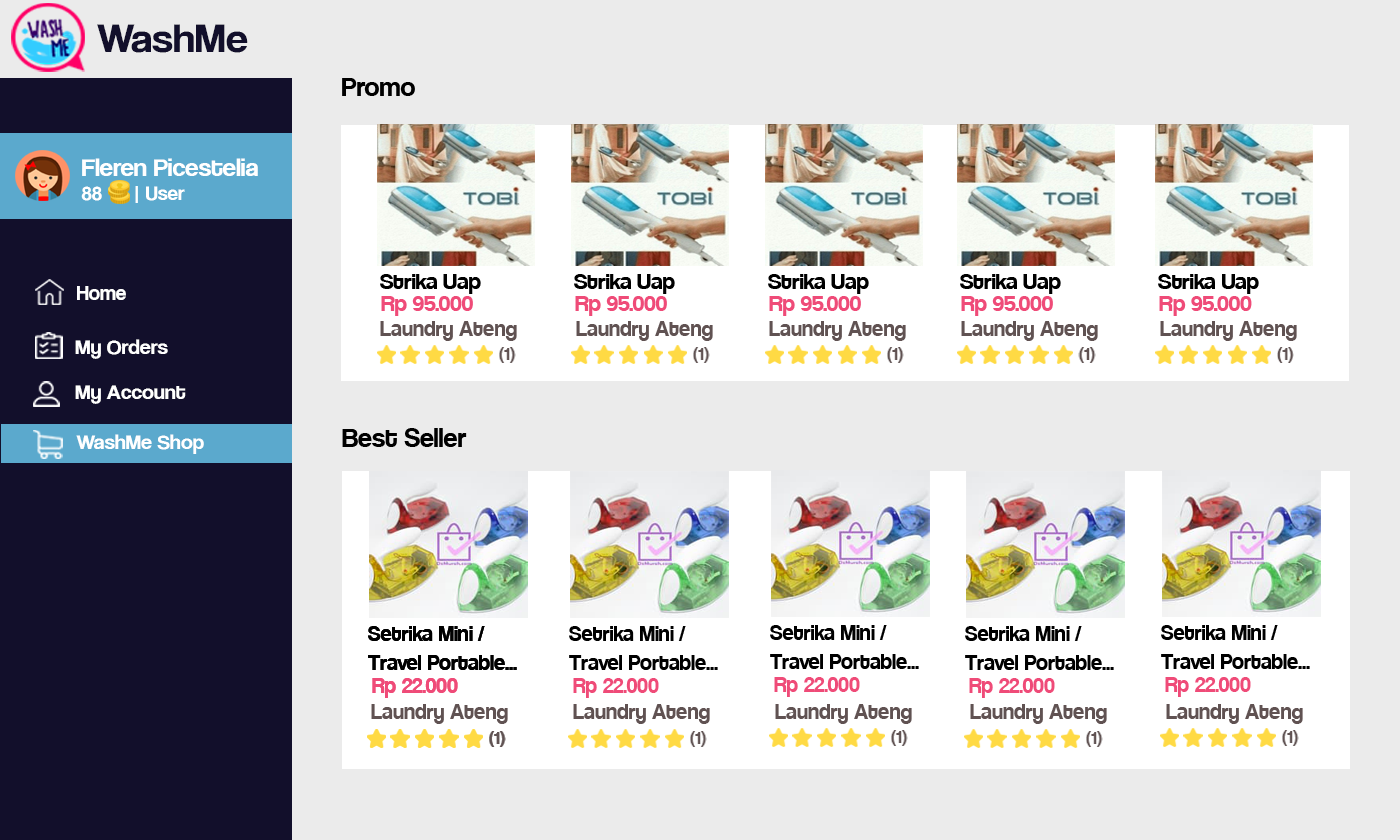
<style>
.page{position:relative;width:1400px;height:840px;background:#ebebeb}
.page>*{position:absolute;margin:0}
.t1{font:42.1px "CoolveticaRg-Regular";color:#120f2b;scale:1.05 1}
.t2{font:30px "Coolvetica-Regular";color:#000000}
.t3{font:25.2px "CoolveticaRg-Regular";color:#ffffff;scale:1.05 1}
.t4{font:20px "CoolveticaRg-Regular";color:#ffffff;scale:1.05 1}
.t5{font:24px "Coolvetica-Regular";color:#000000;scale:1.07 1}
.t6{font:21px "CoolveticaRg-Regular";color:#ffffff}
.t7{font:24px "Coolvetica-Regular";color:#ef4b78;scale:1.07 1}
.t8{font:24px "Coolvetica-Regular";color:#605252}
.t9{font:21px "CoolveticaRg-Regular";color:#ffffff;scale:1.05 1}
.t10{font:18px "CoolveticaRg-Regular";color:#605252;scale:1.07 1}
.t11{font:24px "Coolvetica-Regular";color:#000000}
.t12{font:24px "Coolvetica-Regular";color:#ef4b78}
</style>
<div class="page">
<p class="t1" style="left:97px;top:24px;width:151px;height:29px">WashMe</p>
<p class="t2" style="left:342px;top:78px;width:73px;height:18px">Promo</p>
<p class="t3" style="left:81px;top:158px;width:177px;height:45px">Fleren Picestelia<br><span class="t4">88      | User</span></p>
<p class="t5" style="left:380px;top:274px;width:101px;height:20px">Strika Uap</p>
<p class="t5" style="left:574px;top:274px;width:101px;height:20px">Strika Uap</p>
<p class="t5" style="left:768px;top:274px;width:101px;height:20px">Strika Uap</p>
<p class="t5" style="left:960px;top:274px;width:101px;height:20px">Strika Uap</p>
<p class="t5" style="left:1158px;top:274px;width:101px;height:20px">Strika Uap</p>
<p class="t6" style="left:77px;top:286px;width:49px;height:14px">Home</p>
<p class="t7" style="left:381px;top:296px;width:92px;height:20px">Rp 95.000</p>
<p class="t7" style="left:575px;top:296px;width:92px;height:20px">Rp 95.000</p>
<p class="t7" style="left:769px;top:296px;width:92px;height:20px">Rp 95.000</p>
<p class="t7" style="left:961px;top:296px;width:92px;height:20px">Rp 95.000</p>
<p class="t7" style="left:1159px;top:296px;width:93px;height:20px">Rp 95.000</p>
<p class="t8" style="left:380px;top:321px;width:137px;height:20px">Laundry Ateng</p>
<p class="t8" style="left:576px;top:321px;width:137px;height:20px">Laundry Ateng</p>
<p class="t8" style="left:769px;top:321px;width:137px;height:20px">Laundry Ateng</p>
<p class="t8" style="left:961px;top:321px;width:137px;height:20px">Laundry Ateng</p>
<p class="t8" style="left:1160px;top:321px;width:137px;height:20px">Laundry Ateng</p>
<p class="t9" style="left:75px;top:339px;width:93px;height:20px">My Orders</p>
<p class="t10" style="left:499px;top:347px;width:17px;height:16px">(1)</p>
<p class="t10" style="left:693px;top:347px;width:17px;height:16px">(1)</p>
<p class="t10" style="left:887px;top:347px;width:17px;height:16px">(1)</p>
<p class="t10" style="left:1078px;top:347px;width:18px;height:16px">(1)</p>
<p class="t10" style="left:1277px;top:347px;width:17px;height:16px">(1)</p>
<p class="t9" style="left:75px;top:385px;width:111px;height:19px">My Account</p>
<p class="t9" style="left:76px;top:434px;width:128px;height:20px">WashMe Shop</p>
<p class="t2" style="left:342px;top:428px;width:125px;height:19px">Best Seller</p>
<p class="t11" style="left:368px;top:626px;width:149px;height:44px">Setrika Mini / <br>Travel Portable...</p>
<p class="t11" style="left:368px;top:626px;width:149px;height:44px">Setrika Mini / <br>Travel Portable...</p>
<p class="t11" style="left:569px;top:626px;width:149px;height:44px">Setrika Mini / <br>Travel Portable...</p>
<p class="t11" style="left:770px;top:625px;width:149px;height:44px">Setrika Mini / <br>Travel Portable...</p>
<p class="t11" style="left:965px;top:626px;width:149px;height:44px">Setrika Mini / <br>Travel Portable...</p>
<p class="t11" style="left:1161px;top:625px;width:149px;height:44px">Setrika Mini / <br>Travel Portable...</p>
<p class="t12" style="left:372px;top:678px;width:86px;height:20px">Rp 22.000</p>
<p class="t12" style="left:372px;top:678px;width:86px;height:20px">Rp 22.000</p>
<p class="t12" style="left:573px;top:678px;width:86px;height:20px">Rp 22.000</p>
<p class="t12" style="left:774px;top:677px;width:86px;height:20px">Rp 22.000</p>
<p class="t12" style="left:969px;top:678px;width:86px;height:20px">Rp 22.000</p>
<p class="t12" style="left:1165px;top:677px;width:86px;height:20px">Rp 22.000</p>
<p class="t8" style="left:371px;top:704px;width:137px;height:20px">Laundry Ateng</p>
<p class="t8" style="left:573px;top:704px;width:137px;height:20px">Laundry Ateng</p>
<p class="t8" style="left:775px;top:704px;width:137px;height:20px">Laundry Ateng</p>
<p class="t8" style="left:970px;top:704px;width:137px;height:20px">Laundry Ateng</p>
<p class="t8" style="left:1166px;top:704px;width:137px;height:20px">Laundry Ateng</p>
<p class="t10" style="left:489px;top:731px;width:17px;height:16px">(1)</p>
<p class="t10" style="left:489px;top:731px;width:17px;height:16px">(1)</p>
<p class="t10" style="left:690px;top:731px;width:17px;height:16px">(1)</p>
<p class="t10" style="left:891px;top:730px;width:17px;height:16px">(1)</p>
<p class="t10" style="left:1086px;top:731px;width:17px;height:16px">(1)</p>
<p class="t10" style="left:1282px;top:730px;width:17px;height:16px">(1)</p>
</div>
